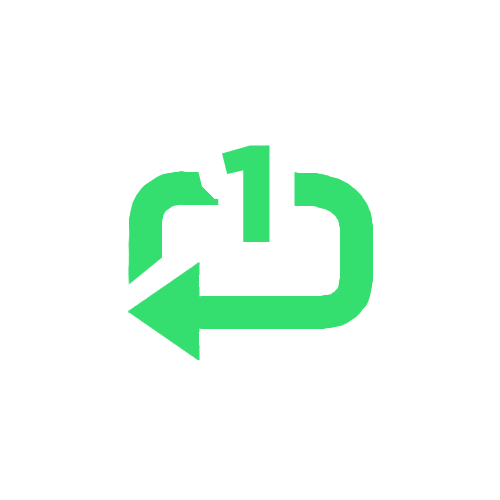
<style>
.page{position:relative;width:500px;height:500px;background:#ffffff}
.page>*{position:absolute;margin:0}
.t1{font:136.8px "Gotham-Black";color:#34df70}
</style>
<div class="page">
<p class="t1" style="left:222px;top:145px;width:48px;height:97px">1</p>
</div>
